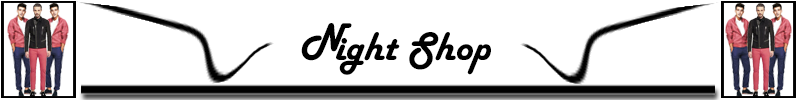
<style>
.page{position:relative;width:800px;height:100px;background:#ffffff}
.page>*{position:absolute;margin:0}
.t1{font:41.6px "HarlowSolid";color:#000000}
</style>
<div class="page">
<p class="t1" style="left:301px;top:23px;width:51px;height:38px">N</p>
<p class="t1" style="left:336px;top:32px;width:155px;height:43px">ight Shop</p>
</div>
